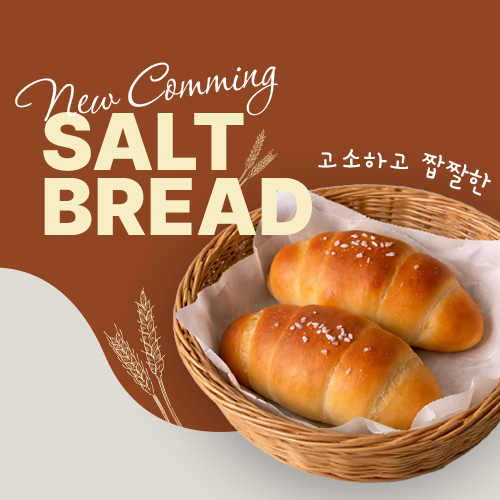
<style>
.page{position:relative;width:500px;height:500px;background:#914623}
.page>*{position:absolute;margin:0}
.t1{font:68.9px "Corinthia-Regular";letter-spacing:-0.01em;color:#ffffff}
.t2{font:80.8px "Pretendard-Black";letter-spacing:-0.01em;color:#f8f0c4;text-transform:uppercase}
.t3{font:30px "GamjaFlower-Regular";letter-spacing:-0.01em;color:#ffffff}
</style>
<div class="page">
<p class="t1" style="left:15px;top:62px;width:263px;height:60px;rotate:-9deg">New Comming</p>
<p class="t2" style="left:43px;top:112px;width:269px;height:123px">Salt<br>Bread</p>
<p class="t3" style="left:318px;top:149px;width:173px;height:47px">고소하고 짭짤한</p>
</div>
